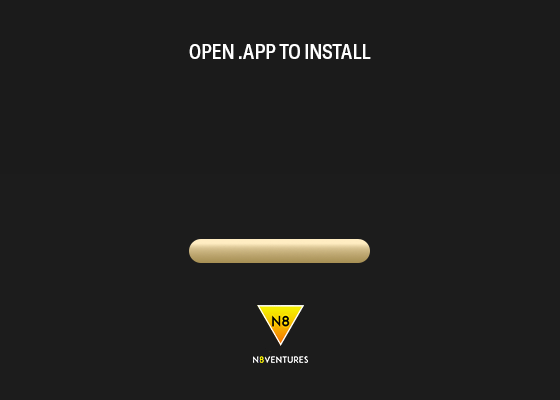
<style>
.page{position:relative;width:560px;height:400px;background:#1c1c1c}
.page>*{position:absolute;margin:0}
.t1{font:20.9px "GTAmerica-CondensedMedium";color:#ffffff;text-transform:uppercase;scale:0.96 1}
</style>
<div class="page">
<p class="t1" style="left:189px;top:44px;width:182px;height:15px">Open .app to Install</p>
</div>
